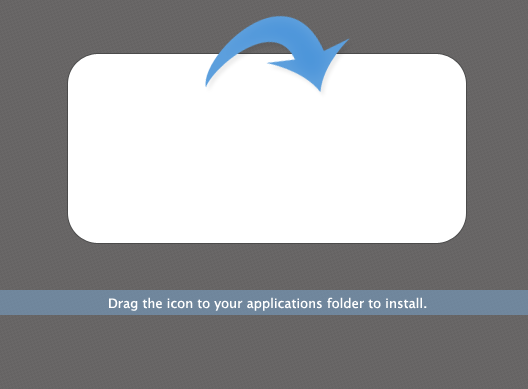
<style>
.page{position:relative;width:528px;height:389px;background:#ffffff}
.page>*{position:absolute;margin:0}
.t1{font:13px "LucidaGrande";color:#ffffff}
</style>
<div class="page">
<p class="t1" style="left:109px;top:297px;width:318px;height:14px">Drag the icon to your applications folder to install.</p>
</div>
